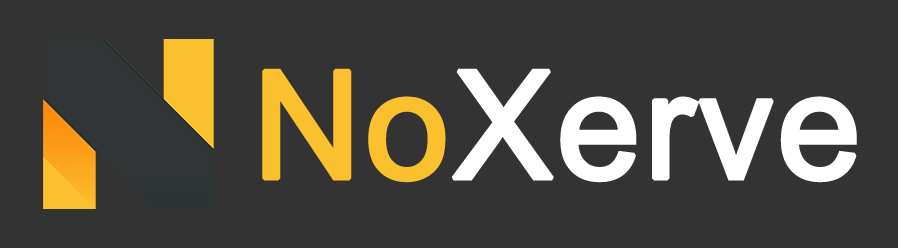
<style>
.page{position:relative;width:898px;height:248px;background:#333333}
.page>*{position:absolute;margin:0}
.t1{font:150px "ArialMT";color:#ffffff;font-weight:bold}
.t2{font:150px "ArialMT";color:#fbc02d;font-weight:bold}
</style>
<div class="page">
<p class="t1" style="left:262px;top:68px;width:595px;height:115px"><span class="t2">No</span>Xerve</p>
</div>
